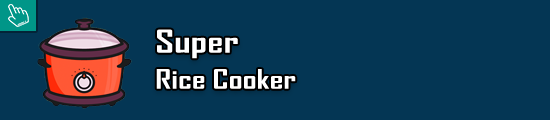
<style>
.page{position:relative;width:550px;height:120px;background:#043654}
.page>*{position:absolute;margin:0}
.t1{font:30.6px "AgencyFB-Bold";color:#ffffff;scale:1.33 1}
.t2{font:25.9px "AgencyFB-Bold";color:#ffffff;scale:1.33 1}
</style>
<div class="page">
<p class="t1" style="left:157px;top:29px;width:81px;height:30px">Super</p>
<p class="t2" style="left:156px;top:69px;width:140px;height:20px">Rice Cooker</p>
</div>
